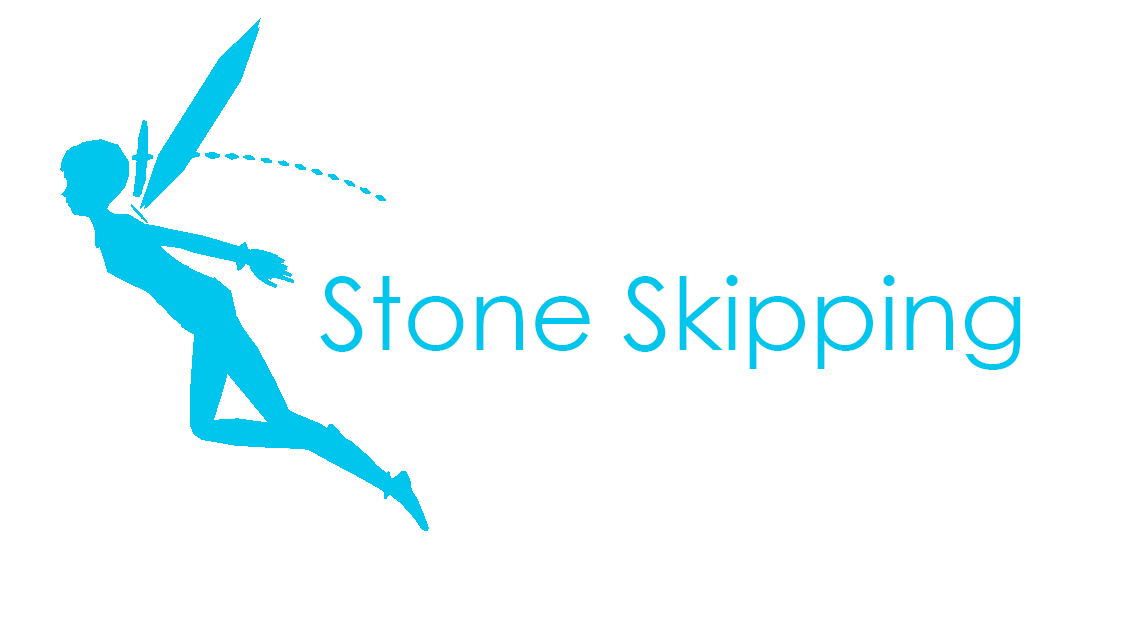
<style>
.page{position:relative;width:1136px;height:640px;background:#ffffff}
.page>*{position:absolute;margin:0}
.t1{font:100px "CenturyGothic";color:#00c5ec}
</style>
<div class="page">
<p class="t1" style="left:320px;top:275px;width:701px;height:95px">Stone Skipping</p>
</div>
